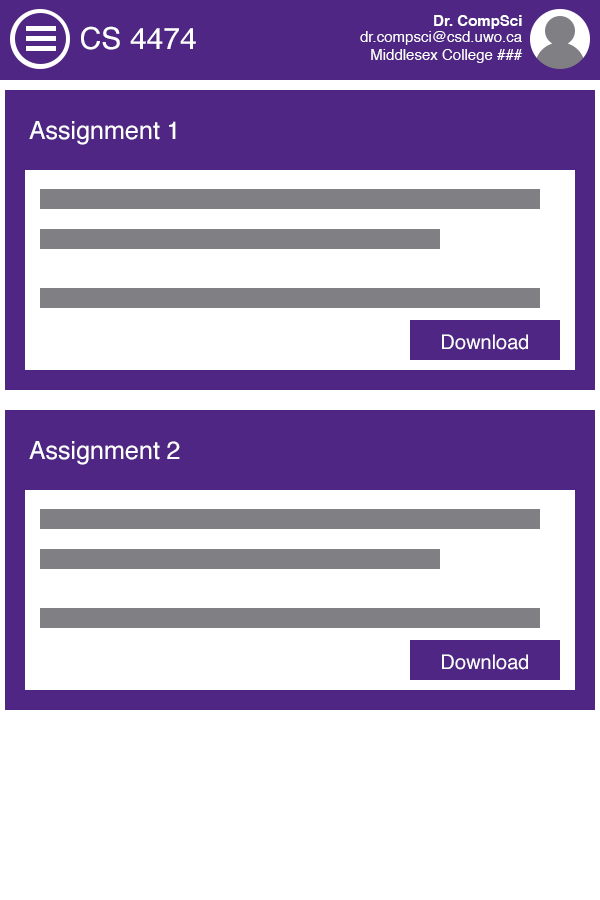
<style>
.page{position:relative;width:600px;height:900px;background:#ffffff}
.page>*{position:absolute;margin:0}
.t1{font:15px "Helvetica-Bold";color:#ffffff}
.t2{font:30px "Helvetica";color:#ffffff}
.t3{font:15px "Helvetica";color:#ffffff}
.t4{font:25px "Helvetica";color:#ffffff}
.t5{font:20px "Helvetica";color:#ffffff}
</style>
<div class="page">
<p class="t1" style="left:434px;top:15px;width:88px;height:14px">Dr. CompSci</p>
<p class="t2" style="left:81px;top:26px;width:115px;height:24px">CS 4474</p>
<p class="t3" style="left:360px;top:31px;width:163px;height:32px;text-align:right">dr.compsci@csd.uwo.ca<br>Middlesex College ###</p>
<p class="t4" style="left:29px;top:121px;width:147px;height:24px">Assignment 1</p>
<p class="t5" style="left:442px;top:334px;width:86px;height:16px">Download</p>
<p class="t4" style="left:29px;top:441px;width:151px;height:24px">Assignment 2</p>
<p class="t5" style="left:442px;top:654px;width:86px;height:16px">Download</p>
</div>
